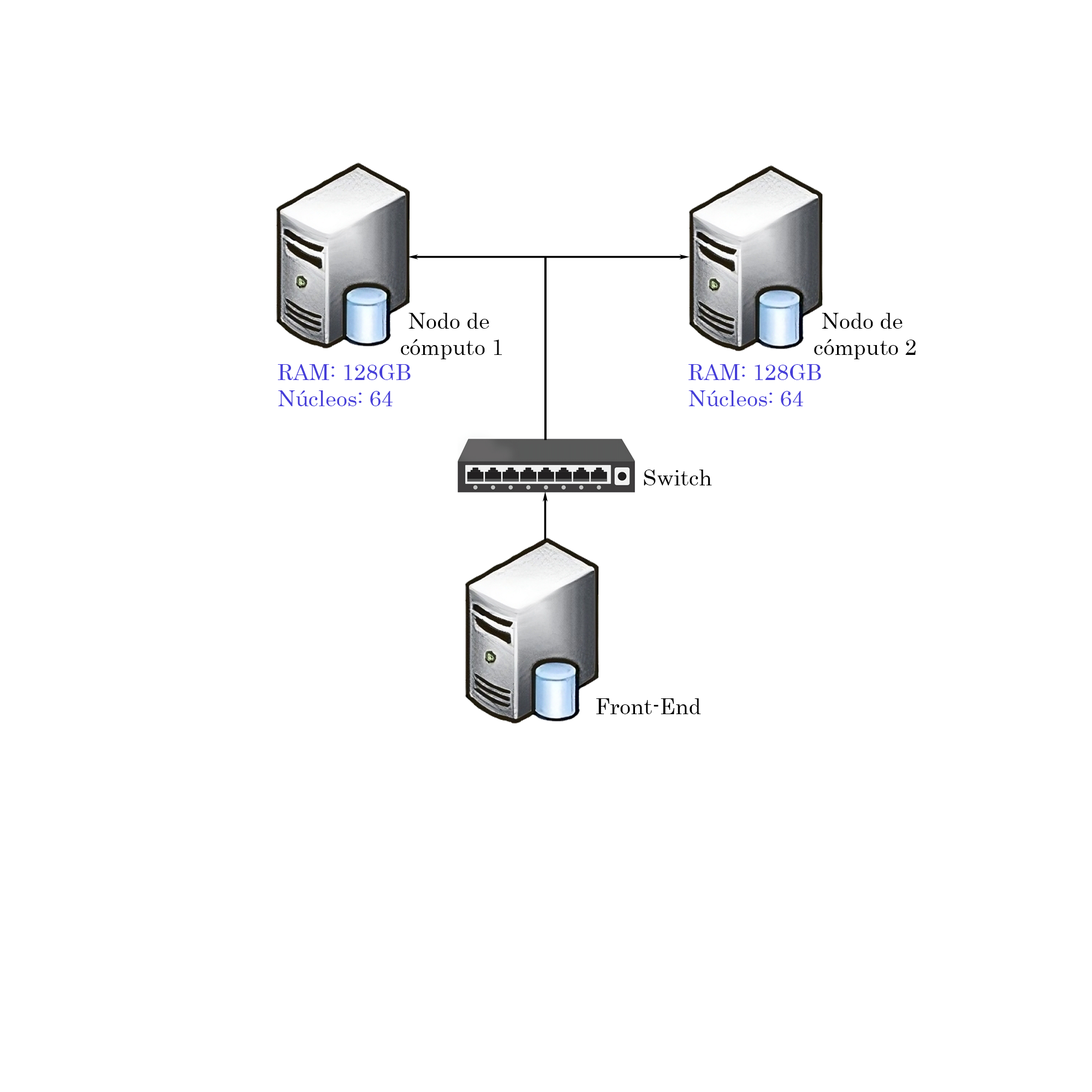
<style>
.page{position:relative;width:1092px;height:1092px;background:#ffffff}
.page>*{position:absolute;margin:0}
.t1{font:21.8px "Century";color:#000000}
.t2{font:21.8px "Century";color:#453dd9}
</style>
<div class="page">
<p class="t1" style="left:401px;top:313px;width:101px;height:46px;text-align:center">Nodo de <br>cómputo 1</p>
<p class="t1" style="left:814px;top:313px;width:102px;height:46px;text-align:center">Nodo de <br>cómputo 2</p>
<p class="t2" style="left:278px;top:364px;width:133px;height:42px">RAM: 128GB<br>Núcleos: 64</p>
<p class="t2" style="left:688px;top:364px;width:133px;height:42px">RAM: 128GB<br>Núcleos: 64</p>
<p class="t1" style="left:644px;top:470px;width:68px;height:15px">Switch</p>
<p class="t1" style="left:596px;top:698px;width:105px;height:16px">Front-End</p>
</div>
